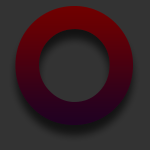
<style>
.page{position:relative;width:150px;height:150px;background:#333333}
.page>*{position:absolute;margin:0}
.t1{font:160.8px "AvantGardeITCbyBT-Demi";letter-spacing:0.04em}
</style>
<div class="page">
<p class="t1" style="left:15px;top:6px;width:118px;height:119px">O</p>
</div>
